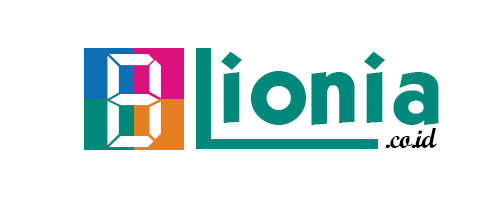
<style>
.page{position:relative;width:500px;height:200px;background:#ffffff}
.page>*{position:absolute;margin:0}
.t1{font:129.9px "Digiface";letter-spacing:-0.025em;color:#ffffff}
.t2{font:83.3px "KabelBook";letter-spacing:-0.025em;color:#00897a}
.t3{font:27.9px "ScriptMTBold";letter-spacing:-0.025em;color:#000000}
</style>
<div class="page">
<p class="t1" style="left:107px;top:54px;width:54px;height:93px">B</p>
<p class="t2" style="left:221px;top:51px;width:218px;height:74px">ionia</p>
<p class="t3" style="left:385px;top:128px;width:52px;height:20px">.co.id</p>
</div>
